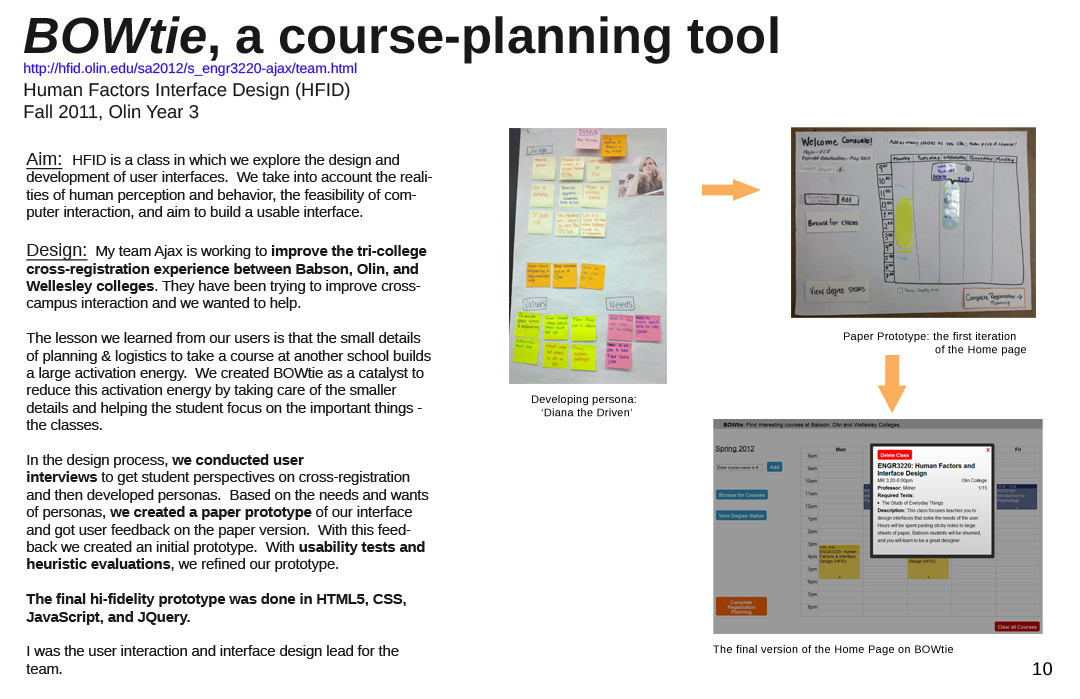
<style>
.page{position:relative;width:1080px;height:699px;background:#ffffff}
.page>*{position:absolute;margin:0}
.t1{font:18.5px "LiberationSans";color:#191717}
.t2{font:50.9px "LiberationSans-BoldItalic";color:#191717}
.t3{font:50.9px "LiberationSans-Bold";color:#191717}
.t4{font:14px "LiberationSans";color:#2f12df}
.t5{font:14.5px "LiberationSans";color:#191717}
.t6{font:18px "LiberationSans";color:#191717;text-decoration:underline}
.t7{font:14.5px "LiberationSans-Bold";color:#191717}
.t8{font:11px "LiberationSans";letter-spacing:0.025em;color:#000000}
.t9{font:18px "LiberationSans";letter-spacing:0.025em;color:#000000}
</style>
<div class="page">
<p class="t1" style="left:24px;top:16px;width:754px;height:105px"><span class="t2">BOWtie</span><span class="t3">, a course-planning tool<br><br></span><span class="t4">http://hfid.olin.edu/sa2012/s_engr3220-ajax/team.html<br></span>Human Factors Interface Design (HFID)<br>Fall 2011, Olin Year 3</p>
<p class="t5" style="left:26px;top:152px;width:406px;height:522px"><span class="t6">Aim:  </span>HFID is a class in which we explore the design and development of user interfaces.  We take into account the realities of human perception and behavior, the feasibility of computer interaction, and aim to build a usable interface.<br><br><span class="t6">Design:</span>  My team Ajax is working to <span class="t7">improve the tri-college cross-registration experience between Babson, Olin, and Wellesley colleges</span>. They have been trying to improve cross-campus interaction and we wanted to help. <br><br>The lesson we learned from our users is that the small details of planning &amp; logistics to take a course at another school builds a large activation energy.  We created BOWtie as a catalyst to reduce this activation energy by taking care of the smaller details and helping the student focus on the important things - the classes.<br><br>In the design process, <span class="t7">we conducted user <br>interviews</span> to get student perspectives on cross-registration and then developed personas.  Based on the needs and wants of personas, <span class="t7">we created a paper prototype</span> of our interface and got user feedback on the paper version.  With this feedback we created an initial prototype.  With <span class="t7">usability tests and heuristic evaluations</span>, we refined our prototype.  <br><br><span class="t7">The final hi-fidelity prototype was done in HTML5, CSS, JavaScript, and JQuery.<br><br></span>I was the user interaction and interface design lead for the team.</p>
<p class="t8" style="left:844px;top:332px;width:182px;height:24px;text-align:justify">Paper Prototype: the first iteration <br>        of the Home page</p>
<p class="t8" style="left:532px;top:395px;width:104px;height:22px;text-align:justify">Developing persona: <br>   ‘Diana the Driven’</p>
<p class="t8" style="left:713px;top:645px;width:240px;height:11px">The final version of the Home Page on BOWtie</p>
<p class="t9" style="left:1033px;top:662px;width:19px;height:14px">10</p>
</div>
